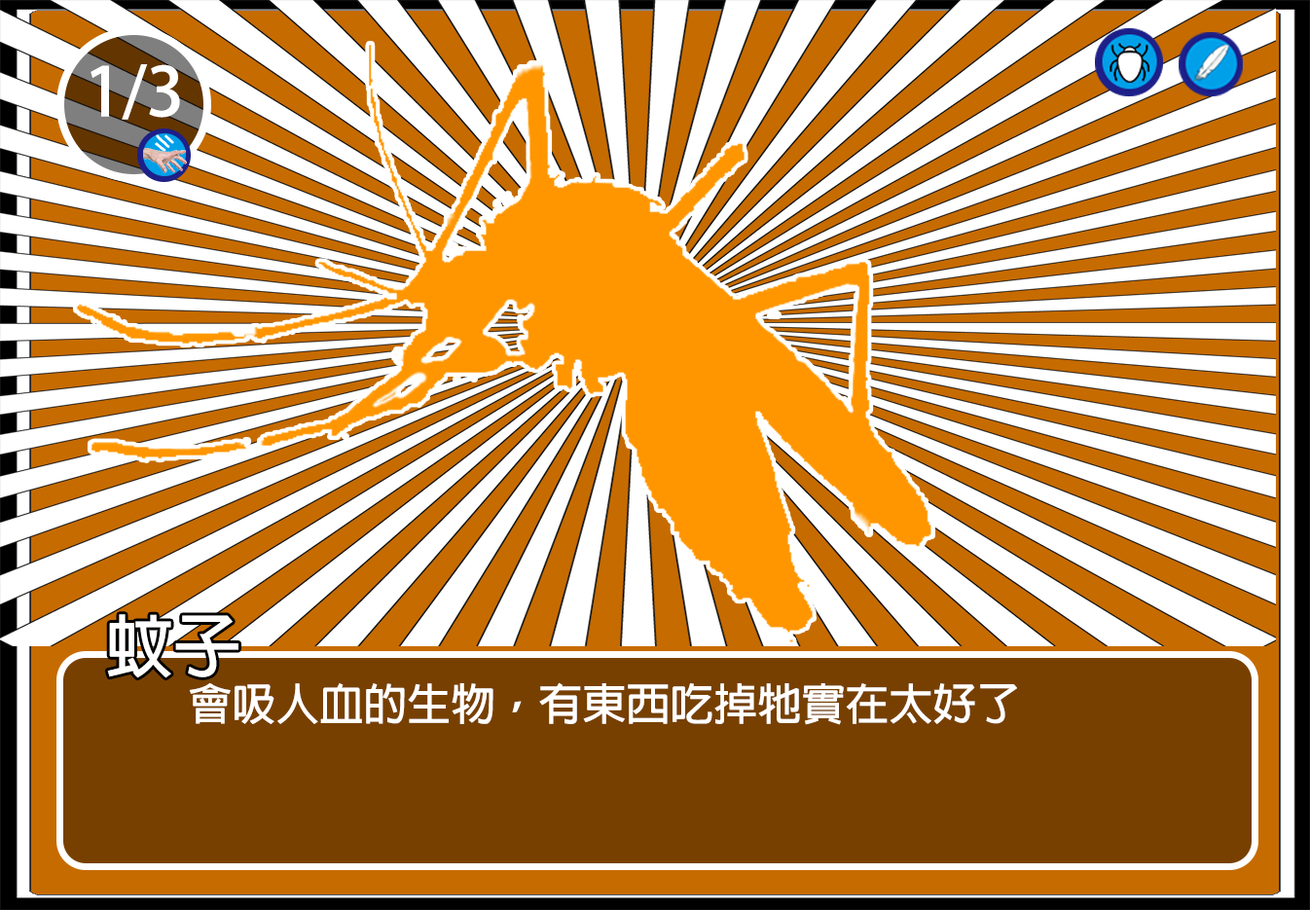
<style>
.page{position:relative;width:1310px;height:910px;background:#ffffff}
.page>*{position:absolute;margin:0}
.t1{font:66.9px "AdobeFanHeitiStd-Bold";color:#ffffff}
.t2{font:68.1px "AdobeFanHeitiStd-Bold";color:#ffffff}
.t3{font:43.8px "AdobeFanHeitiStd-Bold";color:#ffffff}
</style>
<div class="page">
<p class="t1" style="left:91px;top:64px;width:89px;height:56px">1/3</p>
<p class="t2" style="left:107px;top:614px;width:131px;height:64px">蚊子</p>
<p class="t3" style="left:189px;top:682px;width:828px;height:43px">會吸人血的生物，有東西吃掉牠實在太好了</p>
</div>
